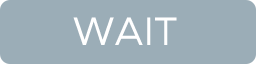
<style>
.page{position:relative;width:256px;height:64px;background:#9badb7}
.page>*{position:absolute;margin:0}
.t1{font:40px "Metropolis-Regular";color:#ffffff}
</style>
<div class="page">
<p class="t1" style="left:73px;top:17px;width:104px;height:28px">WAIT</p>
</div>
